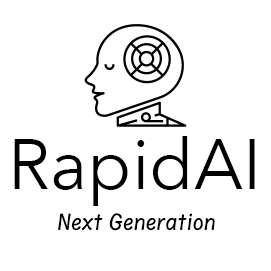
<style>
.page{position:relative;width:271px;height:271px;background:#ffffff}
.page>*{position:absolute;margin:0}
.t1{font:70px "AvenirNext-Regular";color:#000000}
.t2{font:20px "AnnaiMN-Regular";color:#000000}
</style>
<div class="page">
<p class="t1" style="left:14px;top:136px;width:241px;height:70px">RapidAI</p>
<p class="t2" style="left:58px;top:213px;width:157px;height:18px">Next Generation</p>
</div>
